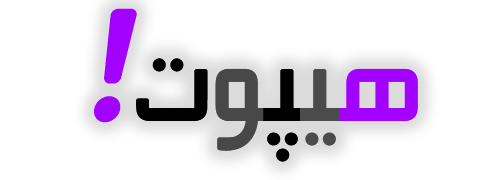
<style>
.page{position:relative;width:500px;height:180px;background:#ffffff}
.page>*{position:absolute;margin:0}
.t1{font:123.3px "Mj_BeirutMd";color:#a200ff}
.t2{font:123.3px "Mj_BeirutMd";color:#4b4b4b}
.t3{font:123.3px "Mj_BeirutMd";color:#000000}
.t4{font:123.3px "Mj_BeirutMd";color:#484848}
.t5{font:193.3px "Mj_BeirutMd";color:#a200ff;font-style:italic}
</style>
<div class="page">
<p class="t1" style="left:94px;top:8px;width:324px;height:154px">ه<span class="t2">ی</span><span class="t3">پ</span><span class="t4">و</span><span class="t3">ت</span><span class="t5">!</span></p>
</div>
